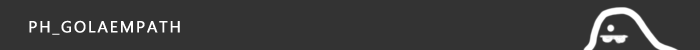
<style>
.page{position:relative;width:700px;height:50px;background:#333333}
.page>*{position:absolute;margin:0}
.t1{font:15.9px "MicrosoftNeoGothic";letter-spacing:0.1em;color:#ffffff;text-transform:uppercase;font-weight:bold}
</style>
<div class="page">
<p class="t1" style="left:29px;top:20px;width:151px;height:15px">PH_GOLAEMPATH</p>
</div>
